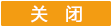
<style>
.page{position:relative;width:112px;height:27px;background:#f39c12}
.page>*{position:absolute;margin:0}
.t1{font:17px "MicrosoftYaHei";letter-spacing:1.02em;color:#ffffff;font-weight:bold}
</style>
<div class="page">
<p class="t1" style="left:31px;top:5px;width:51px;height:18px">关闭</p>
</div>
